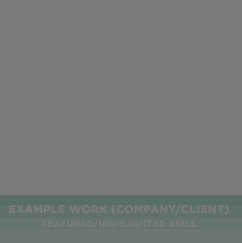
<style>
.page{position:relative;width:242px;height:243px;background:#7a7a7a}
.page>*{position:absolute;margin:0}
.t1{font:11px/14px "Gotham-Bold";letter-spacing:0.025em;color:#7a7a7a;text-transform:uppercase}
.t2{font:9px/14px "Gotham-Bold";letter-spacing:0.025em;color:#7a7a7a;text-transform:uppercase}
</style>
<div class="page">
<p class="t1" style="left:9px;top:204px;width:220px;height:25px;text-align:center">example work (company/client)<br><span class="t2">featured/highlighted skill</span></p>
</div>
